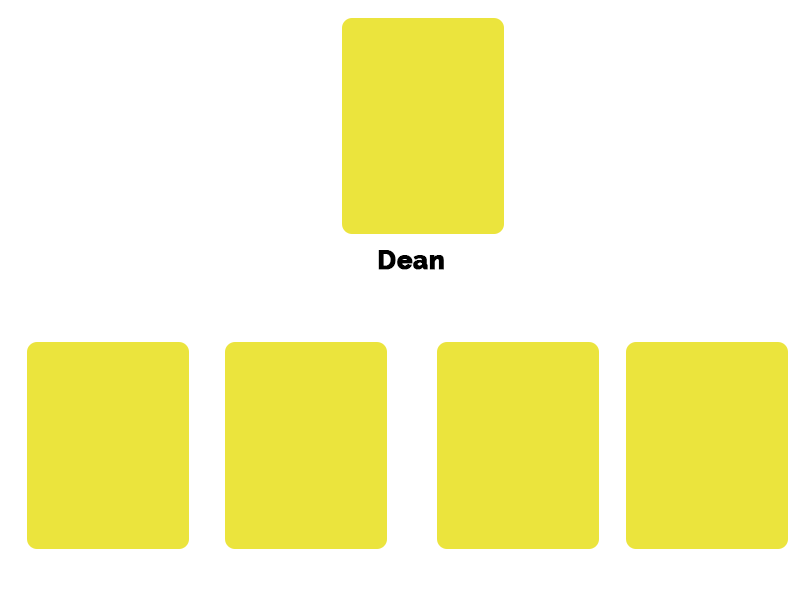
<style>
.page{position:relative;width:800px;height:600px;background:#ffffff}
.page>*{position:absolute;margin:0}
.t1{font:26px "Raleway-ExtraBold";color:#000000;font-weight:bold}
</style>
<div class="page">
<p class="t1" style="left:378px;top:250px;width:66px;height:20px">Dean</p>
</div>
